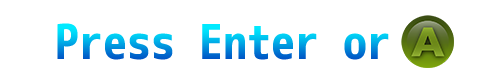
<style>
.page{position:relative;width:488px;height:78px;background:#ffffff}
.page>*{position:absolute;margin:0}
.t1{font:48px "mplus-1m-bold"}
</style>
<div class="page">
<p class="t1" style="left:57px;top:23px;width:382px;height:37px">Press Enter or A</p>
</div>
